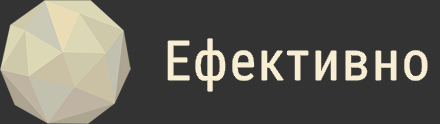
<style>
.page{position:relative;width:440px;height:124px;background:#333333}
.page>*{position:absolute;margin:0}
.t1{font:55px "RobotoCondensed-Regular";letter-spacing:0.04em;color:#f7eed3}
</style>
<div class="page">
<p class="t1" style="left:168px;top:38px;width:260px;height:54px">Ефективно</p>
</div>
